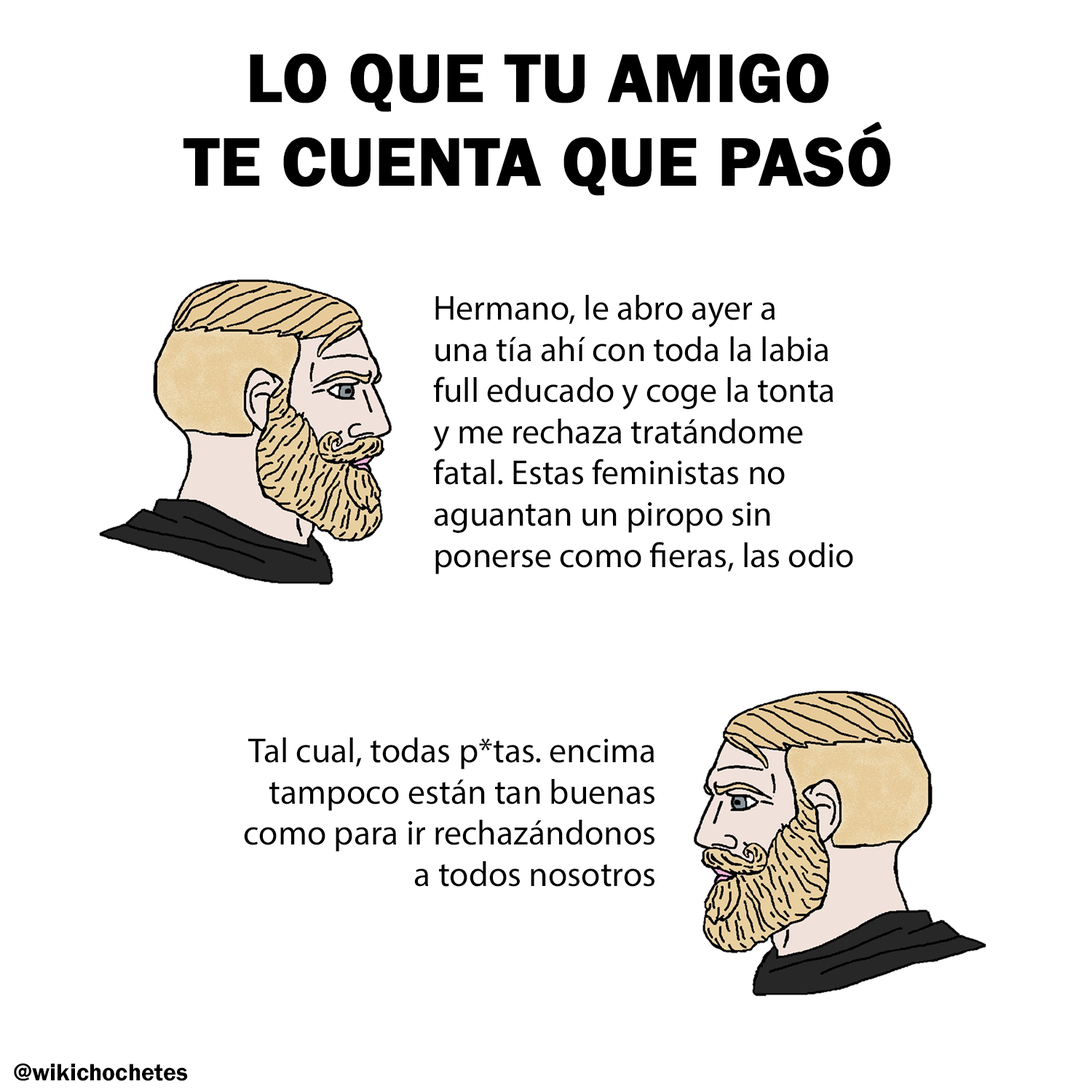
<style>
.page{position:relative;width:1092px;height:1092px;background:#ffffff}
.page>*{position:absolute;margin:0}
.t1{font:70.3px "FranklinGothic-Demi";color:#000000;font-weight:bold}
.t2{font:34.9px "MyriadPro-Regular";color:#000000}
.t3{font:24.5px "FranklinGothic-Demi";color:#000000}
</style>
<div class="page">
<p class="t1" style="left:183px;top:53px;width:707px;height:143px;text-align:center">LO QUE TU AMIGO<br>TE CUENTA QUE PASÓ</p>
<p class="t2" style="left:433px;top:295px;width:420px;height:279px">Hermano, le abro ayer a<br>una tía ahí con toda la labia<br>full educado y coge la tonta<br>y me rechaza tratándome<br>fatal. Estas feministas no<br>aguantan un piropo sin<br>ponerse como fieras, las odio</p>
<p class="t2" style="left:244px;top:737px;width:410px;height:150px;text-align:right">Tal cual, todas p*tas. encima<br>tampoco están tan buenas<br>como para ir rechazándonos<br>a todos nosotros</p>
<p class="t3" style="left:14px;top:1063px;width:174px;height:18px">@wikichochetes</p>
</div>
